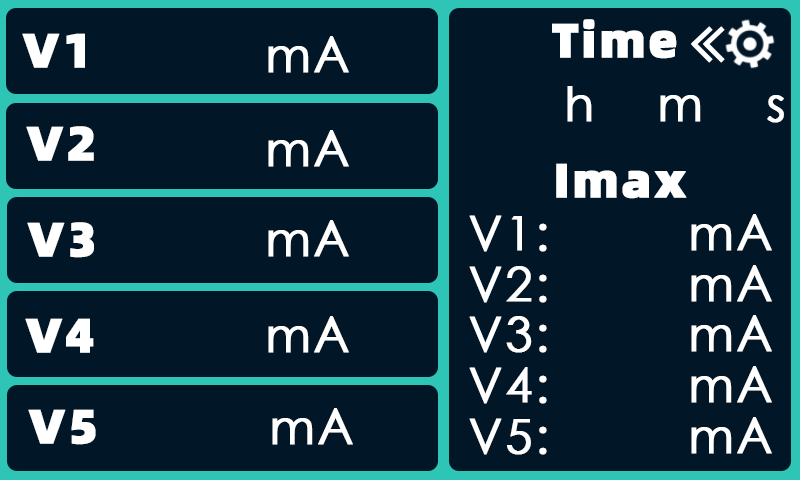
<style>
.page{position:relative;width:800px;height:480px;background:#011627}
.page>*{position:absolute;margin:0}
.t1{font:48px "Alibaba-PuHuiTi-H";letter-spacing:0.04em;color:#ffffff;font-weight:bold}
.t2{font:48px "STXihei";letter-spacing:0.04em;color:#ffffff;font-weight:bold}
.t3{font:48px/50.7px "STXihei";letter-spacing:0.04em;color:#ffffff;font-weight:bold}
</style>
<div class="page">
<p class="t1" style="left:552px;top:19px;width:125px;height:40px">Time</p>
<p class="t1" style="left:22px;top:33px;width:63px;height:35px">V1</p>
<p class="t2" style="left:268px;top:36px;width:81px;height:37px">mA</p>
<p class="t2" style="left:567px;top:86px;width:217px;height:37px">h    m    s</p>
<p class="t1" style="left:26px;top:126px;width:68px;height:35px">V2</p>
<p class="t2" style="left:268px;top:130px;width:81px;height:37px">mA</p>
<p class="t1" style="left:556px;top:163px;width:131px;height:36px">Imax</p>
<p class="t1" style="left:27px;top:222px;width:67px;height:36px">V3</p>
<p class="t2" style="left:268px;top:220px;width:81px;height:37px">mA</p>
<p class="t3" style="left:469px;top:214px;width:303px;height:241px">V1:         mA<br>V2:         mA<br>V3:         mA<br>V4:         mA<br>V5:         mA</p>
<p class="t1" style="left:25px;top:318px;width:69px;height:35px">V4</p>
<p class="t2" style="left:268px;top:316px;width:81px;height:37px">mA</p>
<p class="t1" style="left:28px;top:409px;width:68px;height:36px">V5</p>
<p class="t2" style="left:272px;top:408px;width:81px;height:37px">mA</p>
</div>
